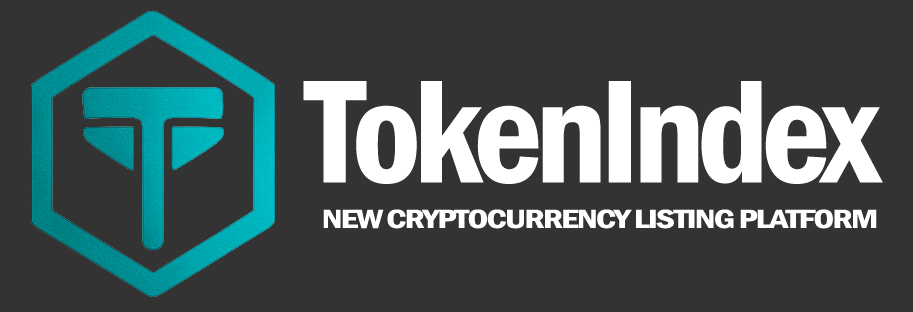
<style>
.page{position:relative;width:913px;height:312px;background:#333333}
.page>*{position:absolute;margin:0}
.t1{font:151.9px "FranklinGothic-DemiCond";letter-spacing:-0.05em;color:#ffffff}
.t2{font:27.3px "FranklinGothic-DemiCond";letter-spacing:-0.05em;color:#ffffff;scale:1.36 1}
</style>
<div class="page">
<p class="t1" style="left:303px;top:81px;width:580px;height:103px">TokenIndex</p>
<p class="t2" style="left:323px;top:209px;width:554px;height:20px">NEW CRYPTOCURRENCY LISTING PLATFORM</p>
</div>
